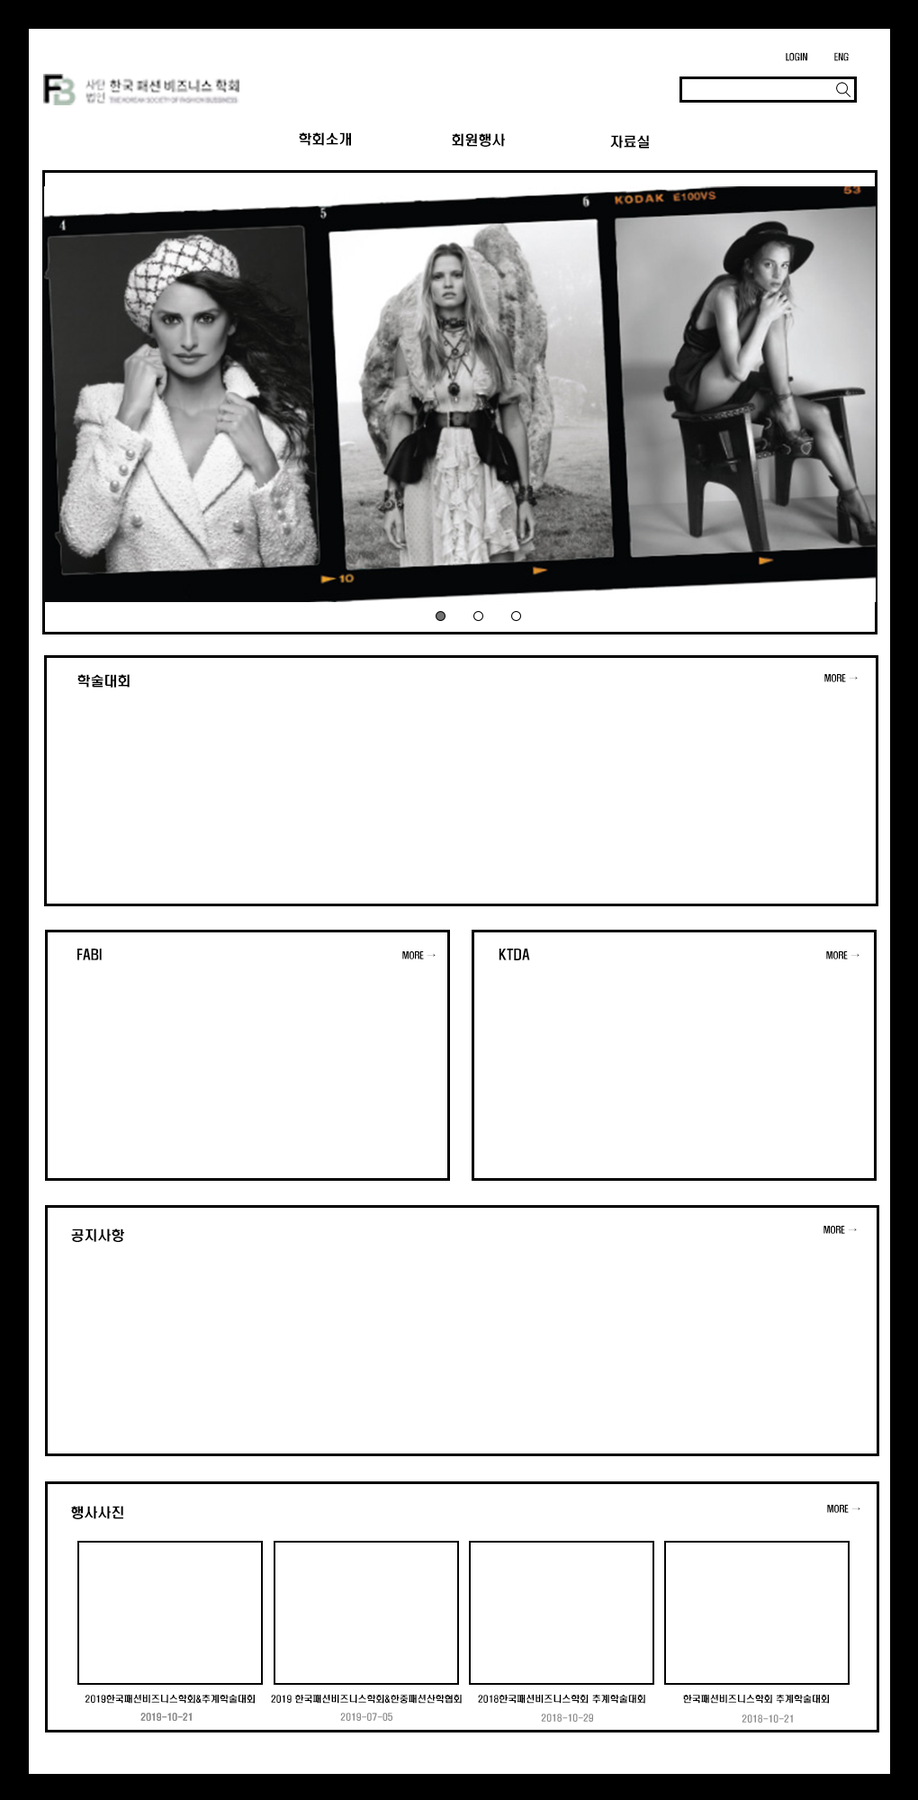
<style>
.page{position:relative;width:918px;height:1800px;background:#ffffff}
.page>*{position:absolute;margin:0}
.t1{font:9px "H2hdrM";color:#000000}
.t2{font:13.5px "H2hdrM";color:#000000}
.t3{font:9px "H2hdrM";color:#8d8c8c}
</style>
<div class="page">
<p class="t1" style="left:786px;top:52px;width:21px;height:9px">LOGIN</p>
<p class="t1" style="left:834px;top:52px;width:15px;height:9px">ENG</p>
<p class="t2" style="left:299px;top:132px;width:52px;height:14px">학회소개</p>
<p class="t2" style="left:452px;top:133px;width:53px;height:14px">회원행사</p>
<p class="t2" style="left:610px;top:135px;width:39px;height:13px">자료실</p>
<p class="t2" style="left:77px;top:674px;width:53px;height:14px">학술대회</p>
<p class="t1" style="left:824px;top:674px;width:34px;height:8px">MORE →</p>
<p class="t2" style="left:77px;top:949px;width:25px;height:11px">FABI</p>
<p class="t1" style="left:402px;top:951px;width:34px;height:8px">MORE →</p>
<p class="t2" style="left:499px;top:949px;width:31px;height:11px">KTDA</p>
<p class="t1" style="left:826px;top:951px;width:34px;height:8px">MORE →</p>
<p class="t2" style="left:71px;top:1228px;width:53px;height:14px">공지사항</p>
<p class="t1" style="left:824px;top:1226px;width:33px;height:8px">MORE →</p>
<p class="t2" style="left:71px;top:1506px;width:52px;height:13px">행사사진</p>
<p class="t1" style="left:827px;top:1505px;width:33px;height:8px">MORE →</p>
<p class="t1" style="left:86px;top:1694px;width:169px;height:10px">2019한국패션비즈니스학회&amp;추계학술대회</p>
<p class="t1" style="left:271px;top:1694px;width:191px;height:10px">2019 한국패션비즈니스학회&amp;한중패션산학협회</p>
<p class="t1" style="left:478px;top:1694px;width:167px;height:10px">2018한국패션비즈니스학회 추계학술대회</p>
<p class="t1" style="left:683px;top:1694px;width:146px;height:10px">한국패션비즈니스학회 추계학술대회</p>
<p class="t3" style="left:140px;top:1713px;width:52px;height:8px">2019-10-21</p>
<p class="t3" style="left:140px;top:1713px;width:52px;height:8px">2019-10-21</p>
<p class="t3" style="left:340px;top:1713px;width:52px;height:8px">2019-07-05</p>
<p class="t3" style="left:541px;top:1714px;width:52px;height:8px">2018-10-29</p>
<p class="t3" style="left:742px;top:1714px;width:51px;height:9px">2018-10-21</p>
</div>
